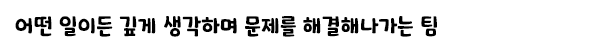
<style>
.page{position:relative;width:600px;height:50px;background:#ffffff}
.page>*{position:absolute;margin:0}
.t1{font:22px "Katuri";color:#000000}
</style>
<div class="page">
<p class="t1" style="left:15px;top:16px;width:422px;height:21px">어떤 일이든 깊게 생각하며 문제를 해결해나가는 팀</p>
</div>
